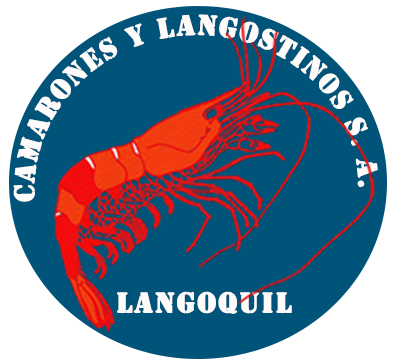
<style>
.page{position:relative;width:400px;height:359px;background:#00547a}
.page>*{position:absolute;margin:0}
.t1{font:29.5px "Stencil";letter-spacing:0.05em;color:#fefbfb;text-transform:uppercase;font-weight:bold}
</style>
<div class="page">
<p class="t1" style="left:13px;top:14px;width:365px;height:188px;rotate:13deg">camarones y langostinos S. a.</p>
<p class="t1" style="left:117px;top:291px;width:175px;height:23px">langoquil</p>
</div>
